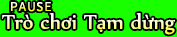
<style>
.page{position:relative;width:177px;height:37px;background:#18ff00}
.page>*{position:absolute;margin:0}
.t1{font:24px "UTM-Nyala"}
</style>
<div class="page">
<p class="t1" style="left:2px;top:13px;width:173px;height:22px">Trò chơi Tạm dừng</p>
</div>
